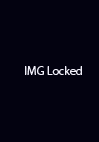
<style>
.page{position:relative;width:99px;height:142px;background:#030210}
.page>*{position:absolute;margin:0}
.t1{font:12px "MyriadPro-Regular";color:#f0eff9}
</style>
<div class="page">
<p class="t1" style="left:25px;top:66px;width:57px;height:9px">IMG Locked</p>
</div>
